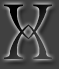
<style>
.page{position:relative;width:59px;height:69px;background:#404040}
.page>*{position:absolute;margin:0}
.t1{font:72px "Morpheus"}
</style>
<div class="page">
<p class="t1" style="left:4px;top:4px;width:48px;height:55px">X</p>
</div>
